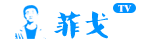
<style>
.page{position:relative;width:150px;height:42px;background:#ffffff}
.page>*{position:absolute;margin:0}
.t1{font:10px "Dutch801BT-ExtraBold";color:#ffffff}
.t2{font:30px "-";color:#0093ff}
</style>
<div class="page">
<p class="t1" style="left:118px;top:5px;width:14px;height:7px">TV</p>
<p class="t2" style="left:54px;top:11px;width:54px;height:28px">菲戈</p>
</div>
